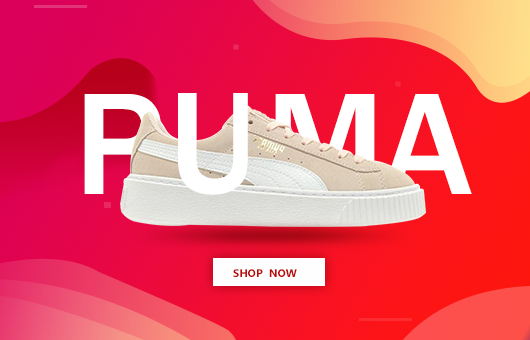
<style>
.page{position:relative;width:530px;height:340px}
.page>*{position:absolute;margin:0}
.t1{font:150px "FranklinGothic-Medium";color:#ffffff}
.t2{font:150px "FranklinGothic-Medium"}
.t3{font:11px "MicrosoftNewTaiLue-Bold";color:#bc0a0a}
</style>
<div class="page">
<p class="t1" style="left:84px;top:94px;width:77px;height:100px">P</p>
<p class="t1" style="left:178px;top:93px;width:70px;height:102px">U</p>
<p class="t2" style="left:275px;top:94px;width:100px;height:100px">M</p>
<p class="t1" style="left:382px;top:94px;width:90px;height:100px">A</p>
<p class="t3" style="left:233px;top:269px;width:64px;height:8px">SHOP  NOW</p>
</div>
